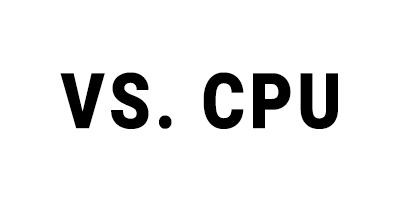
<style>
.page{position:relative;width:400px;height:200px;background:#ffffff}
.page>*{position:absolute;margin:0}
.t1{font:76.8px "Roboto-Black";letter-spacing:0.05em;color:#000000;font-weight:bold;scale:0.85 1}
</style>
<div class="page">
<p class="t1" style="left:60px;top:72px;width:278px;height:57px">VS. CPU</p>
</div>
